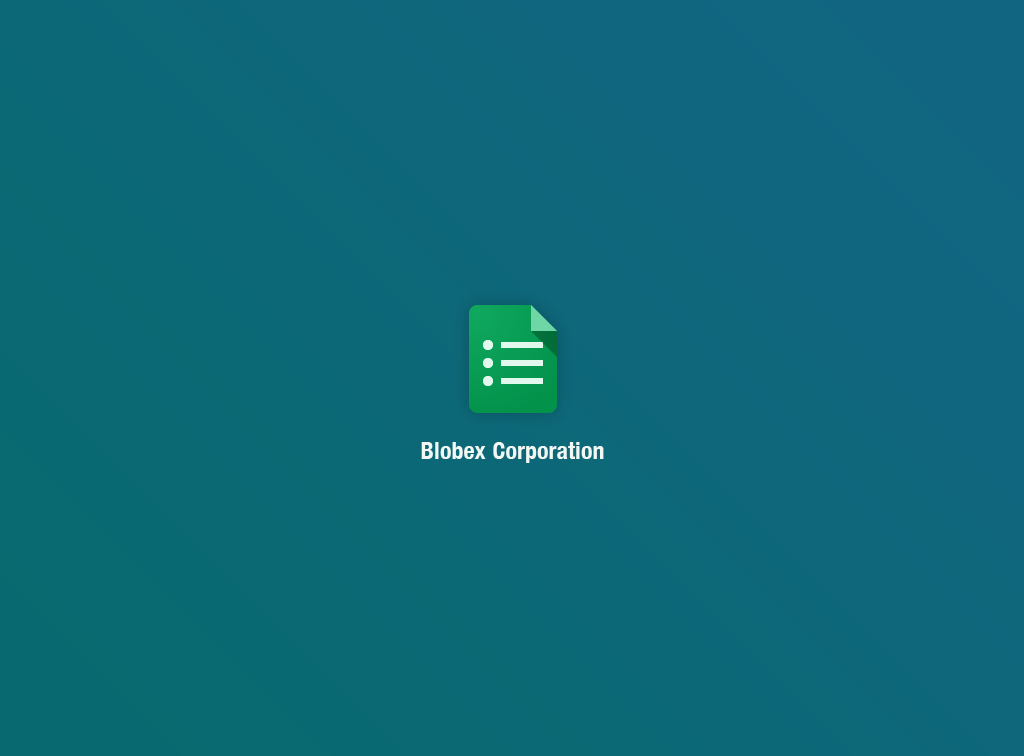
<style>
.page{position:relative;width:1024px;height:756px}
.page>*{position:absolute;margin:0}
.t1{font:24px "HelveticaNeue-CondensedBold";color:#f2f7f4}
</style>
<div class="page">
<p class="t1" style="left:421px;top:442px;width:183px;height:21px">Blobex Corporation</p>
</div>
